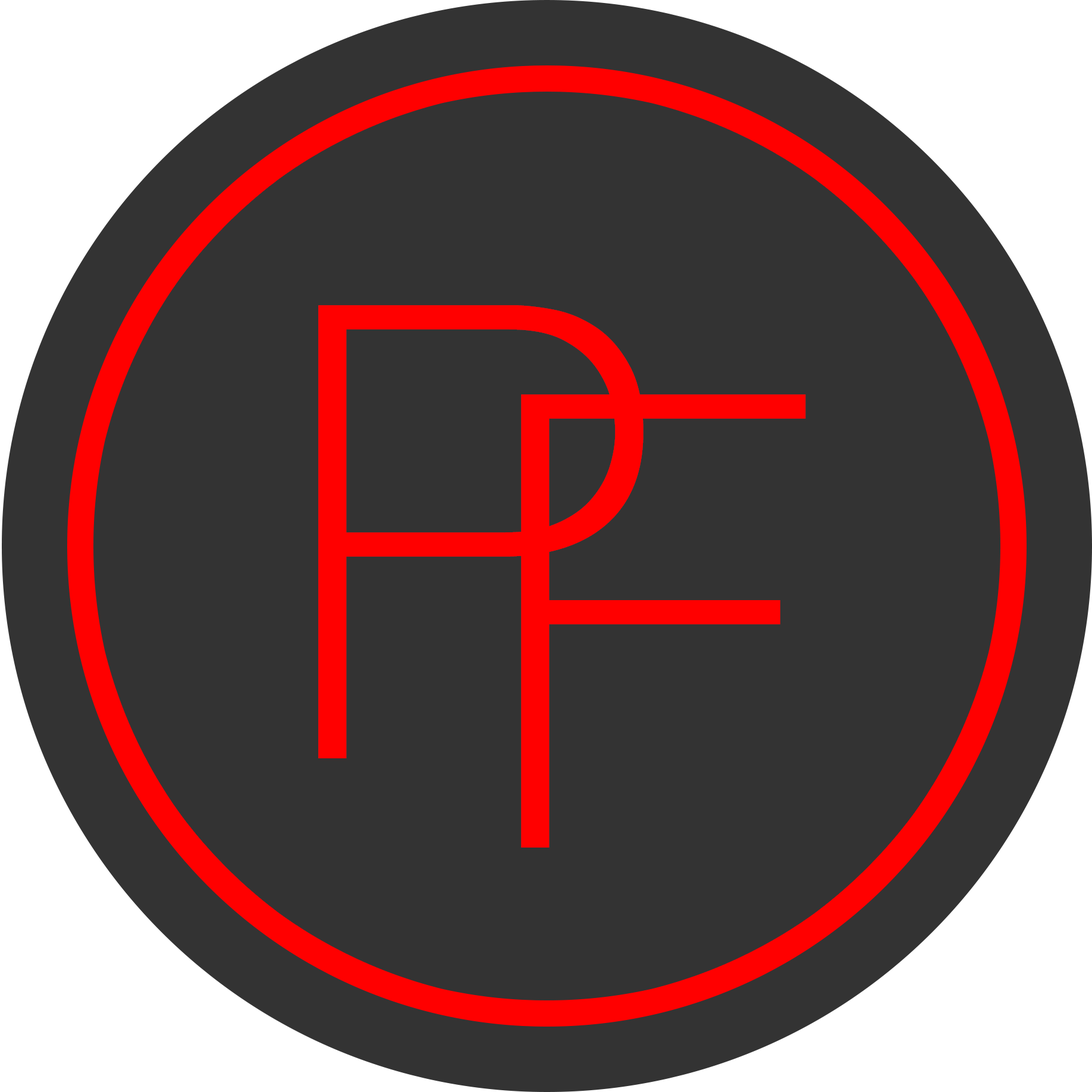
<style>
.page{position:relative;width:1092px;height:1092px;background:#333333}
.page>*{position:absolute;margin:0}
.t1{font:634.5px "HelveticaNeue-Thin";color:#ff0000;text-transform:uppercase}
</style>
<div class="page">
<p class="t1" style="left:318px;top:305px;width:326px;height:453px">P</p>
<p class="t1" style="left:521px;top:394px;width:285px;height:454px">F</p>
</div>
